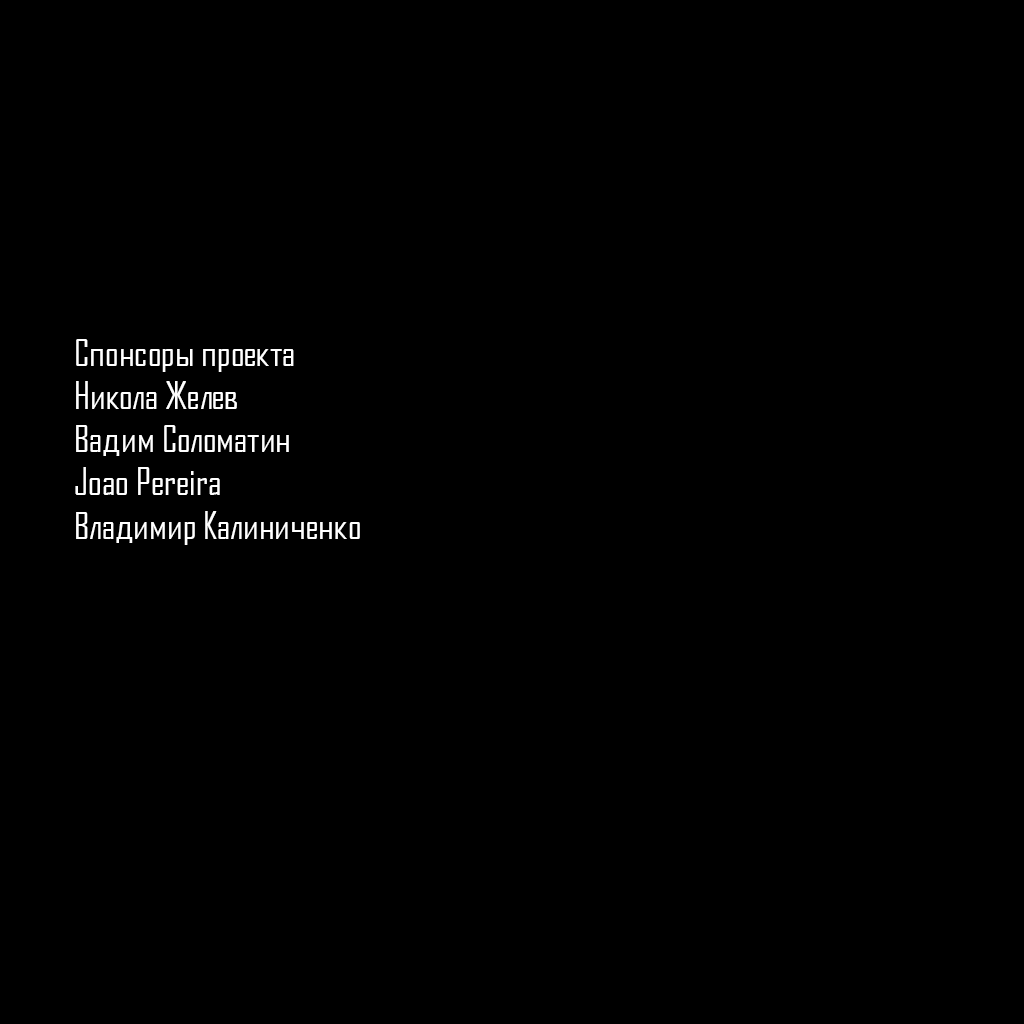
<style>
.page{position:relative;width:1024px;height:1024px;background:#000000}
.page>*{position:absolute;margin:0}
.t1{font:36px "AgencyFBCyrillic";color:#ffffff}
</style>
<div class="page">
<p class="t1" style="left:75px;top:339px;width:285px;height:206px">Спонсоры проекта<br>Никола Желев<br>Вадим Соломатин<br>Joao Pereira<br>Владимир Калиниченко</p>
</div>
